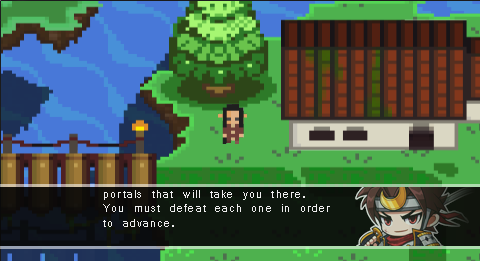
<style>
.page{position:relative;width:480px;height:261px}
.page>*{position:absolute;margin:0}
.t1{font:12px "Vrinda";letter-spacing:0.1em;color:#fefefe}
</style>
<div class="page">
<p class="t1" style="left:103px;top:190px;width:227px;height:37px;opacity:0.9">portals that will take you there. <br>  You must defeat each one in order <br>  to advance.</p>
</div>
